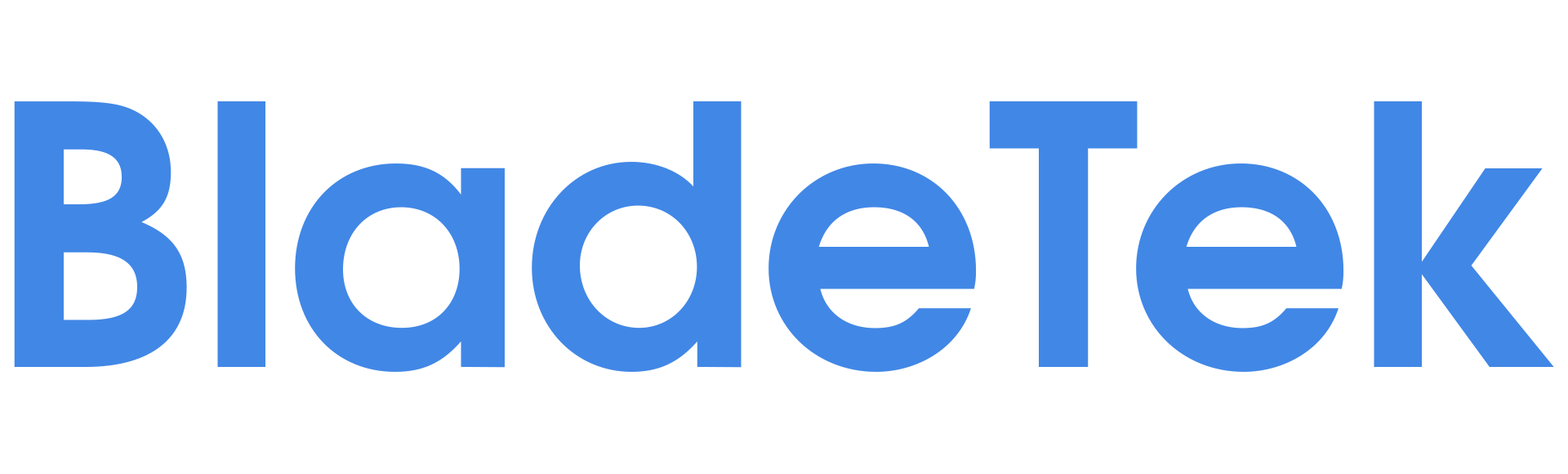
<style>
.page{position:relative;width:1568px;height:474px;background:#ffffff}
.page>*{position:absolute;margin:0}
.t1{font:358.7px "TeXGyreAdventor-Bold";color:#4187e6}
</style>
<div class="page">
<p class="t1" style="left:14px;top:101px;width:1540px;height:271px">BladeTek</p>
</div>
